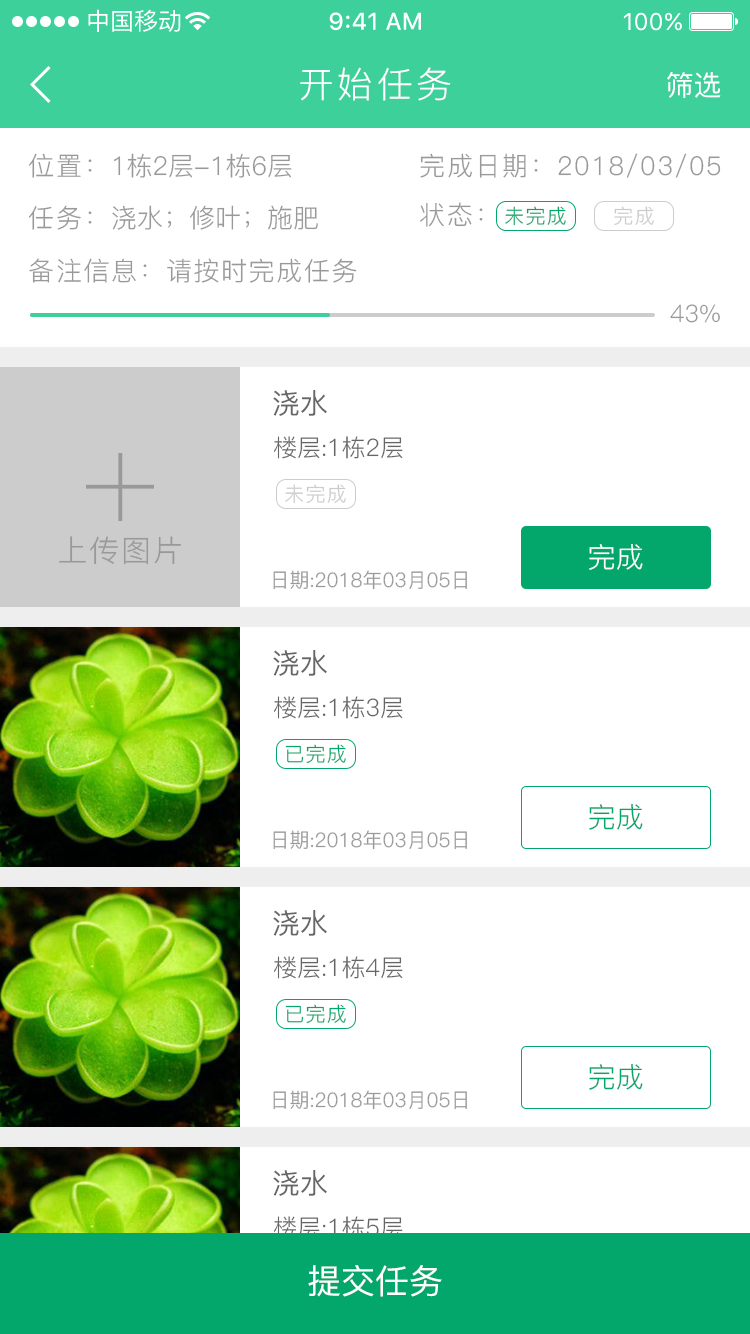
<style>
.page{position:relative;width:750px;height:1334px;background:#ffffff}
.page>*{position:absolute;margin:0}
.t1{font:36px "PingFang-SC-Regular";letter-spacing:0.1em;color:#ffffff}
.t2{font:28px "PingFang-SC-Medium";color:#ffffff}
.t3{font:26px "PingFang-SC-Regular";color:#999999}
.t4{font:26px "PingFang-SC-Regular";letter-spacing:0.06em;color:#999999}
.t5{font:20px "PingFang-SC-Regular";letter-spacing:0.06em;color:#04a76b}
.t6{font:20px "PingFang-SC-Regular";letter-spacing:0.06em;color:#cccccc}
.t7{font:24px "PingFang-SC-Regular";color:#999999}
.t8{font:28px "PingFang-SC-Medium";color:#666666}
.t9{font:24px "PingFang-SC-Regular";color:#666666}
.t10{font:30px "PingFang-SC-Regular";letter-spacing:0.06em;color:#999999}
.t11{font:28px "PingFang-SC-Regular";color:#ffffff}
.t12{font:20px "PingFang-SC-Regular";color:#999999}
.t13{font:28px "PingFang-SC-Regular";color:#04a76b}
.t14{font:34px "PingFang-SC-Medium";color:#ffffff}
</style>
<div class="page">
<p class="t1" style="left:300px;top:67px;width:151px;height:34px">开始任务</p>
<p class="t2" style="left:667px;top:72px;width:54px;height:26px">筛选</p>
<p class="t3" style="left:29px;top:153px;width:263px;height:25px"><span class="t4">位置：</span>1栋2层-1栋6层</p>
<p class="t4" style="left:420px;top:153px;width:301px;height:25px">完成日期：2018/03/05</p>
<p class="t3" style="left:29px;top:205px;width:289px;height:25px"><span class="t4">任务：</span>浇水；修叶；施肥</p>
<p class="t4" style="left:420px;top:202px;width:63px;height:25px">状态：</p>
<p class="t5" style="left:505px;top:206px;width:61px;height:20px">未完成</p>
<p class="t6" style="left:614px;top:206px;width:40px;height:20px">完成</p>
<p class="t4" style="left:29px;top:258px;width:328px;height:25px">备注信息：请按时完成任务</p>
<p class="t7" style="left:670px;top:304px;width:50px;height:19px">43%</p>
<p class="t8" style="left:273px;top:390px;width:54px;height:26px">浇水</p>
<p class="t9" style="left:274px;top:436px;width:129px;height:23px">楼层:1栋2层</p>
<p class="t6" style="left:285px;top:484px;width:61px;height:20px">未完成</p>
<p class="t10" style="left:59px;top:536px;width:122px;height:29px">上传图片</p>
<p class="t11" style="left:589px;top:544px;width:54px;height:26px">完成</p>
<p class="t12" style="left:273px;top:570px;width:194px;height:20px">日期:2018年03月05日</p>
<p class="t8" style="left:273px;top:650px;width:54px;height:26px">浇水</p>
<p class="t9" style="left:274px;top:696px;width:129px;height:23px">楼层:1栋3层</p>
<p class="t5" style="left:285px;top:744px;width:61px;height:20px">已完成</p>
<p class="t13" style="left:589px;top:804px;width:54px;height:26px">完成</p>
<p class="t12" style="left:273px;top:830px;width:194px;height:20px">日期:2018年03月05日</p>
<p class="t8" style="left:273px;top:910px;width:54px;height:26px">浇水</p>
<p class="t9" style="left:274px;top:956px;width:129px;height:23px">楼层:1栋4层</p>
<p class="t5" style="left:285px;top:1004px;width:61px;height:20px">已完成</p>
<p class="t13" style="left:589px;top:1064px;width:54px;height:26px">完成</p>
<p class="t12" style="left:273px;top:1090px;width:194px;height:20px">日期:2018年03月05日</p>
<p class="t8" style="left:273px;top:1170px;width:54px;height:26px">浇水</p>
<p class="t9" style="left:274px;top:1216px;width:129px;height:23px">楼层:1栋5层</p>
<p class="t14" style="left:308px;top:1265px;width:134px;height:32px">提交任务</p>
</div>
